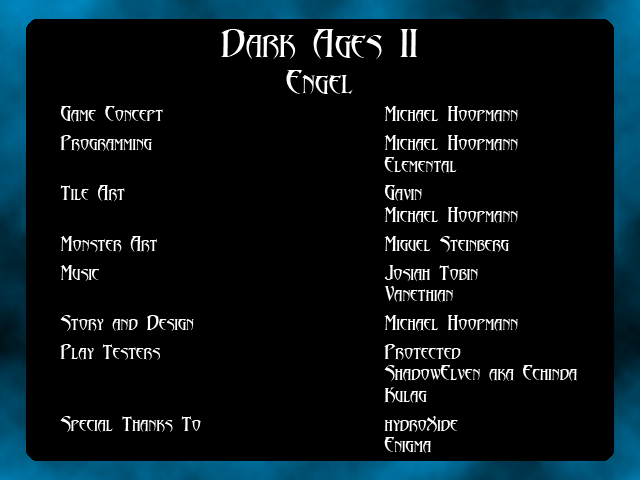
<style>
.page{position:relative;width:640px;height:480px;background:#000000}
.page>*{position:absolute;margin:0}
.t1{font:36px "Abaddon";color:#ffffff}
.t2{font:30px "Abaddon";color:#ffffff}
.t3{font:18px "Abaddon";color:#ffffff}
</style>
<div class="page">
<p class="t1" style="left:221px;top:29px;width:197px;height:65px;text-align:center">Dark Ages II::<br><span class="t2">Engel</span></p>
<p class="t3" style="left:60px;top:106px;width:517px;height:347px">Game Concept       Michael Hoopmann<br> <br>Programming       Michael Hoopmann<br>         Elemental<br> <br>Tile Art        Gavin<br>         Michael Hoopmann<br> <br>Monster Art       Miguel Steinberg<br> <br>Music        Josiah Tobin<br>         Vanethian<br> <br>Story &amp;and Design      Michael Hoopmann<br> <br>Play Testers       Protected<br>         ShadowElven aka (Echinda)<br>         Kulag<br> <br>Special Thanks To      hydroXide<br>         Enigma</p>
</div>
